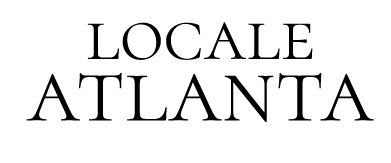
<style>
.page{position:relative;width:391px;height:163px;background:#ffffff}
.page>*{position:absolute;margin:0}
.t1{font:75px "CormorantSC-Light";color:#000000}
.t2{font:95.6px "CormorantSC-Light";color:#000000}
</style>
<div class="page">
<p class="t1" style="left:87px;top:22px;width:226px;height:38px">locale</p>
<p class="t2" style="left:26px;top:72px;width:348px;height:50px">atlanta</p>
</div>
